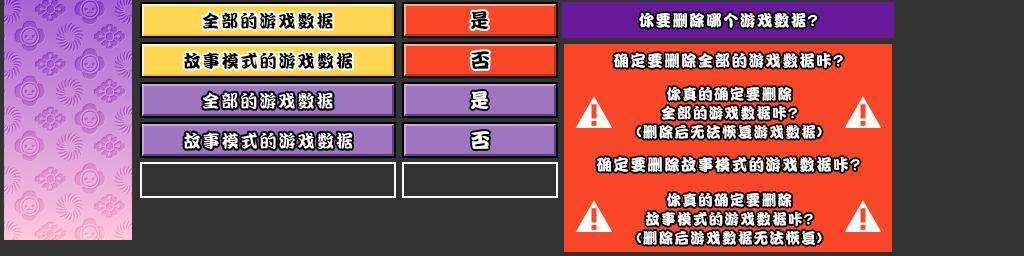
<style>
.page{position:relative;width:1024px;height:256px;background:#333333}
.page>*{position:absolute;margin:0}
.t1{font:18px "DFPKanTingLiuW9";letter-spacing:0.1em;color:#000000;scale:0.96 1}
.t2{font:20px "DFPKanTingLiuW9";letter-spacing:0.09em;color:#000000;scale:0.96 1}
.t3{font:16px "DFPKanTingLiuW9";letter-spacing:0.1em;color:#ffffff;scale:0.96 1}
.t4{font:15px/19px "DFPKanTingLiuW9";letter-spacing:0.1em;color:#ffffff;scale:0.96 1}
.t5{font:18px "DFPKanTingLiuW9";letter-spacing:0.1em;color:#ffffff;scale:0.96 1}
.t6{font:20px "DFPKanTingLiuW9";letter-spacing:0.09em;color:#ffffff;scale:0.96 1}
</style>
<div class="page">
<p class="t1" style="left:203px;top:12px;width:130px;height:17px">全部的游戏数据</p>
<p class="t2" style="left:471px;top:11px;width:17px;height:18px">是</p>
<p class="t3" style="left:639px;top:13px;width:178px;height:15px">你要删除哪个游戏数据?</p>
<p class="t1" style="left:184px;top:52px;width:169px;height:17px">故事模式的游戏数据</p>
<p class="t2" style="left:471px;top:51px;width:18px;height:18px">否</p>
<p class="t3" style="left:614px;top:53px;width:229px;height:15px">确定要删除全部的游戏数据咔?</p>
<p class="t4" style="left:636px;top:86px;width:186px;height:53px;text-align:center">你真的确定要删除<br>全部的游戏数据咔?<br>(删除后无法恢复游戏数据)</p>
<p class="t5" style="left:203px;top:92px;width:130px;height:17px">全部的游戏数据</p>
<p class="t6" style="left:471px;top:91px;width:17px;height:18px">是</p>
<p class="t5" style="left:184px;top:132px;width:169px;height:17px">故事模式的游戏数据</p>
<p class="t6" style="left:471px;top:131px;width:18px;height:18px">否</p>
<p class="t3" style="left:597px;top:157px;width:263px;height:15px">确定要删除故事模式的游戏数据咔?</p>
<p class="t4" style="left:636px;top:192px;width:186px;height:53px;text-align:center">你真的确定要删除<br>故事模式的游戏数据咔?<br>(删除后游戏数据无法恢复)</p>
</div>
